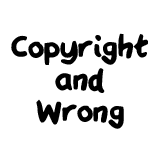
<style>
.page{position:relative;width:160px;height:160px;background:#ffffff}
.page>*{position:absolute;margin:0}
.t1{font:35.9px/31.9px "QAReports";color:#000000}
</style>
<div class="page">
<p class="t1" style="left:11px;top:33px;width:137px;height:96px;text-align:center">Copyright<br>and<br>Wrong</p>
</div>
